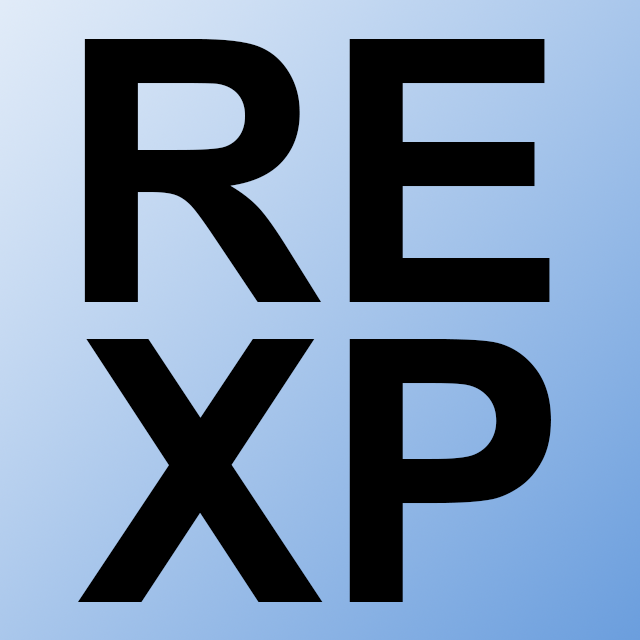
<style>
.page{position:relative;width:640px;height:640px;background:#000000}
.page>*{position:absolute;margin:0}
.t1{font:366.8px "Arial-BoldMT";color:#000000}
</style>
<div class="page">
<p class="t1" style="left:84px;top:39px;width:466px;height:263px">RE</p>
<p class="t1" style="left:77px;top:339px;width:474px;height:263px">XP</p>
</div>
